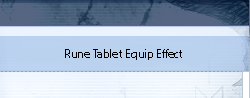
<style>
.page{position:relative;width:250px;height:98px}
.page>*{position:absolute;margin:0}
.t1{font:12px "MyriadPro-Regular";color:#000000}
</style>
<div class="page">
<p class="t1" style="left:65px;top:49px;width:117px;height:11px">Rune Tablet Equip Effect</p>
</div>
